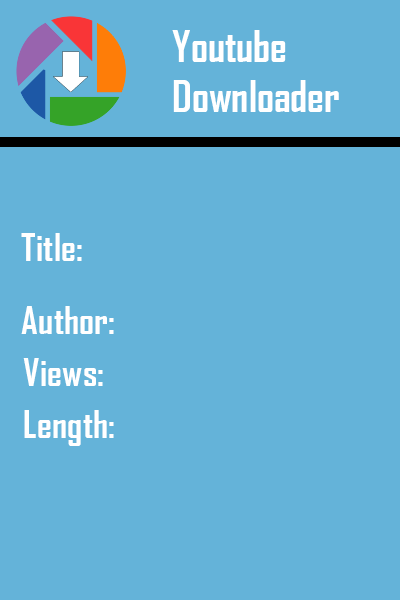
<style>
.page{position:relative;width:400px;height:600px;background:#64b3d9}
.page>*{position:absolute;margin:0}
.t1{font:41.7px "AgencyFB-Bold";color:#ffffff}
.t2{font:37.5px "AgencyFB-Bold";color:#ffffff}
</style>
<div class="page">
<p class="t1" style="left:172px;top:30px;width:167px;height:82px">Youtube<br>Downloader</p>
<p class="t2" style="left:21px;top:233px;width:61px;height:28px">Title:</p>
<p class="t2" style="left:21px;top:306px;width:93px;height:28px">Author:</p>
<p class="t2" style="left:23px;top:358px;width:80px;height:28px">Views:</p>
<p class="t2" style="left:24px;top:410px;width:90px;height:36px">Length:</p>
</div>
